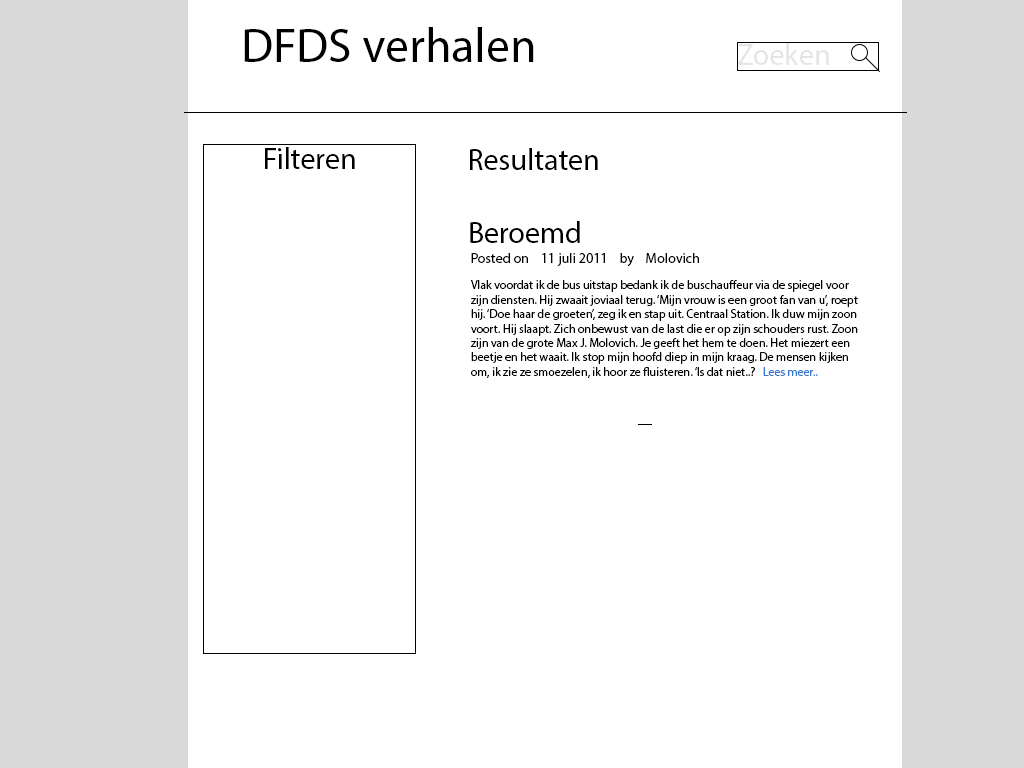
<style>
.page{position:relative;width:1024px;height:768px;background:#ffffff}
.page>*{position:absolute;margin:0}
.t1{font:48px "MyriadPro-Regular";color:#000000}
.t2{font:30px "MyriadPro-Regular";color:#e7e4e4}
.t3{font:30px "MyriadPro-Regular";color:#000000}
.t4{font:14px "MyriadPro-Regular";color:#000000}
.t5{font:12px "MyriadPro-Regular";color:#000000}
.t6{font:12px "MyriadPro-Regular";color:#3877ce}
</style>
<div class="page">
<p class="t1" style="left:244px;top:27px;width:290px;height:35px">DFDS verhalen</p>
<p class="t2" style="left:738px;top:43px;width:91px;height:22px">Zoeken</p>
<p class="t3" style="left:265px;top:147px;width:90px;height:22px">Filteren</p>
<p class="t3" style="left:470px;top:148px;width:128px;height:22px">Resultaten</p>
<p class="t3" style="left:470px;top:221px;width:110px;height:22px">Beroemd</p>
<p class="t4" style="left:471px;top:253px;width:228px;height:14px">Posted on    11 juli 2011    by    Molovich</p>
<p class="t5" style="left:471px;top:280px;width:387px;height:98px">Vlak voordat ik de bus uitstap bedank ik de buschauffeur via de spiegel voor zijn diensten. Hij zwaait joviaal terug. ‘Mijn vrouw is een groot fan van u’, roept hij. ‘Doe haar de groeten’, zeg ik en stap uit. Centraal Station. Ik duw mijn zoon voort. Hij slaapt. Zich onbewust van de last die er op zijn schouders rust. Zoon zijn van de grote Max J. Molovich. Je geeft het hem te doen. Het miezert een beetje en het waait. Ik stop mijn hoofd diep in mijn kraag. De mensen kijken om, ik zie ze smoezelen, ik hoor ze fluisteren. ‘Is dat niet..?   <span class="t6">Lees meer..</span></p>
</div>
